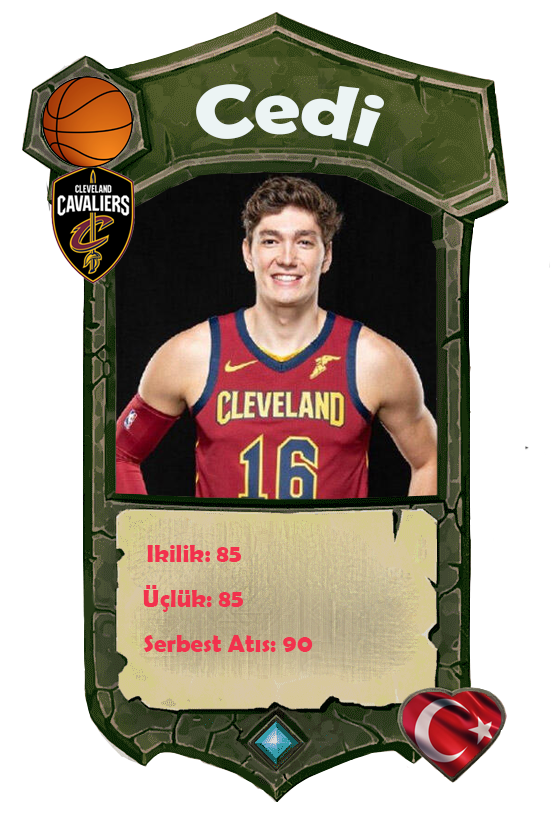
<style>
.page{position:relative;width:558px;height:814px;background:#ffffff}
.page>*{position:absolute;margin:0}
.t1{font:75.7px "BerlinSansFBDemi-Bold";color:#ecf4f4;scale:1.06 1}
.t2{font:25px "BerlinSansFBDemi-Bold";color:#f2314d}
</style>
<div class="page">
<p class="t1" style="left:196px;top:84px;width:188px;height:63px;rotate:1deg">Cedi</p>
<p class="t2" style="left:147px;top:545px;width:94px;height:17px">Ikilik: 85</p>
<p class="t2" style="left:143px;top:585px;width:100px;height:27px">Üçlük: 85</p>
<p class="t2" style="left:144px;top:635px;width:169px;height:17px">Serbest Atıs: 90</p>
</div>
